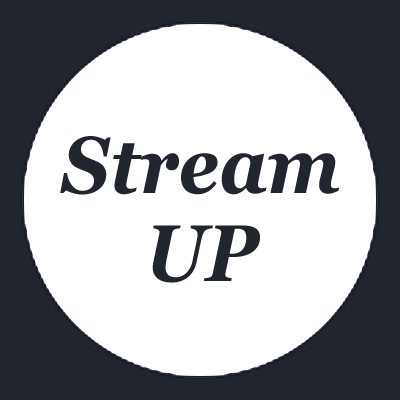
<style>
.page{position:relative;width:400px;height:400px;background:#ffffff}
.page>*{position:absolute;margin:0}
.t1{font:80px/88px "Georgia-BoldItalic";color:#21252e;scale:0.91 1}
</style>
<div class="page">
<p class="t1" style="left:60px;top:136px;width:280px;height:147px;text-align:center">Stream<br>UP</p>
</div>
